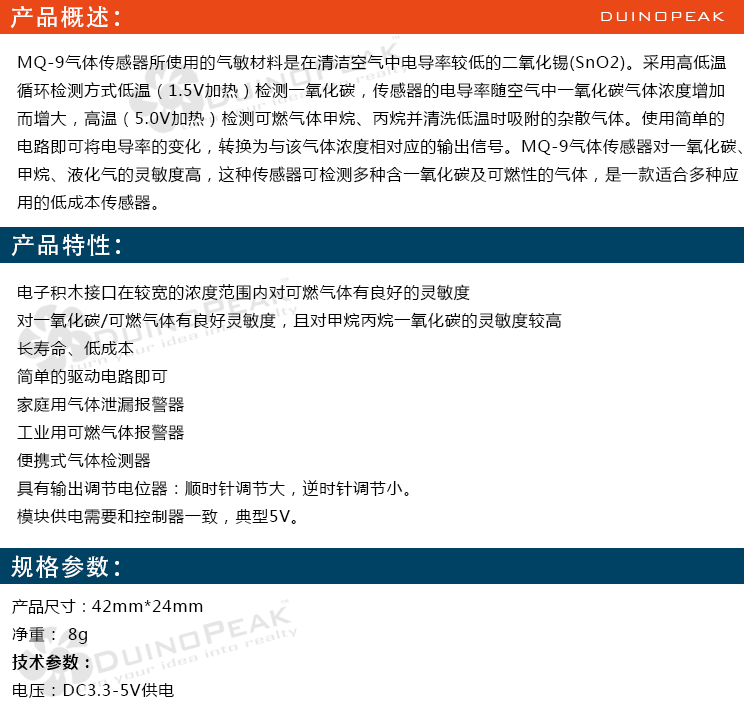
<style>
.page{position:relative;width:744px;height:709px;background:#ffffff}
.page>*{position:absolute;margin:0}
.t1{font:24px "AdobeHeitiStd-Regular";letter-spacing:0.05em;color:#ffffff}
.t2{font:18px "BankGothicBT-Light";letter-spacing:0.05em;color:#ffffff}
.t3{font:16px "MicrosoftYaHei";letter-spacing:0.05em;color:#000000}
.t4{font:16px "MicrosoftYaHei";color:#000000}
.t5{font:16px "MicrosoftYaHei-Bold";letter-spacing:0.05em;color:#000000}
</style>
<div class="page">
<p class="t1" style="left:10px;top:6px;width:109px;height:23px">产品概述：</p>
<p class="t2" style="left:601px;top:12px;width:124px;height:9px">DUINOPEAK</p>
<p class="t3" style="left:17px;top:54px;width:726px;height:156px">MQ-9气体传感器所使用的气敏材料是在清洁空气中电导率较低的二氧化锡(SnO2)。采用高低温<br>循环检测方式低温（1.5V加热）检测一氧化碳，传感器的电导率随空气中一氧化碳气体浓度增加<br>而增大，高温（5.0V加热）检测可燃气体甲烷、丙烷并清洗低温时吸附的杂散气体。使用简单的<br>电路即可将电导率的变化，转换为与该气体浓度相对应的输出信号。MQ-9气体传感器对一氧化碳、<br>甲烷、液化气的灵敏度高，这种传感器可检测多种含一氧化碳及可燃性的气体，是一款适合多种应<br>用的低成本传感器。</p>
<p class="t1" style="left:11px;top:233px;width:109px;height:24px">产品特性：</p>
<p class="t3" style="left:17px;top:284px;width:545px;height:241px">电子积木接口在较宽的浓度范围内对可燃气体有良好的灵敏度<br>对一氧化碳/可燃气体有良好灵敏度，且对甲烷丙烷一氧化碳的灵敏度较高<br>长寿命、低成本<br>简单的驱动电路即可<br>家庭用气体泄漏报警器<br>工业用可燃气体报警器<br>便携式气体检测器<br>具有输出调节电位器：顺时针调节大，逆时针调节小。<br>模块供电需要和控制器一致，典型5V。</p>
<p class="t1" style="left:11px;top:555px;width:108px;height:23px">规格参数：</p>
<p class="t3" style="left:12px;top:599px;width:191px;height:99px"><span class="t4">产品尺寸：</span>42mm*24mm<br>净重： 8g<br><span class="t5">技术参数：<br></span>电压：DC3.3-5V供电</p>
</div>
